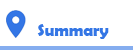
<style>
.page{position:relative;width:134px;height:50px;background:#ffffff}
.page>*{position:absolute;margin:0}
.t1{font:16.7px "BerlinSansFBDemi-Bold";color:#3476e5}
</style>
<div class="page">
<p class="t1" style="left:37px;top:24px;width:72px;height:15px">Summary</p>
</div>
